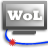
<style>
.page{position:relative;width:48px;height:48px}
.page>*{position:absolute;margin:0}
.t1{font:14px "Rockwell-ExtraBold";color:#ffffff}
</style>
<div class="page">
<p class="t1" style="left:7px;top:10px;width:36px;height:11px">WoL</p>
</div>
